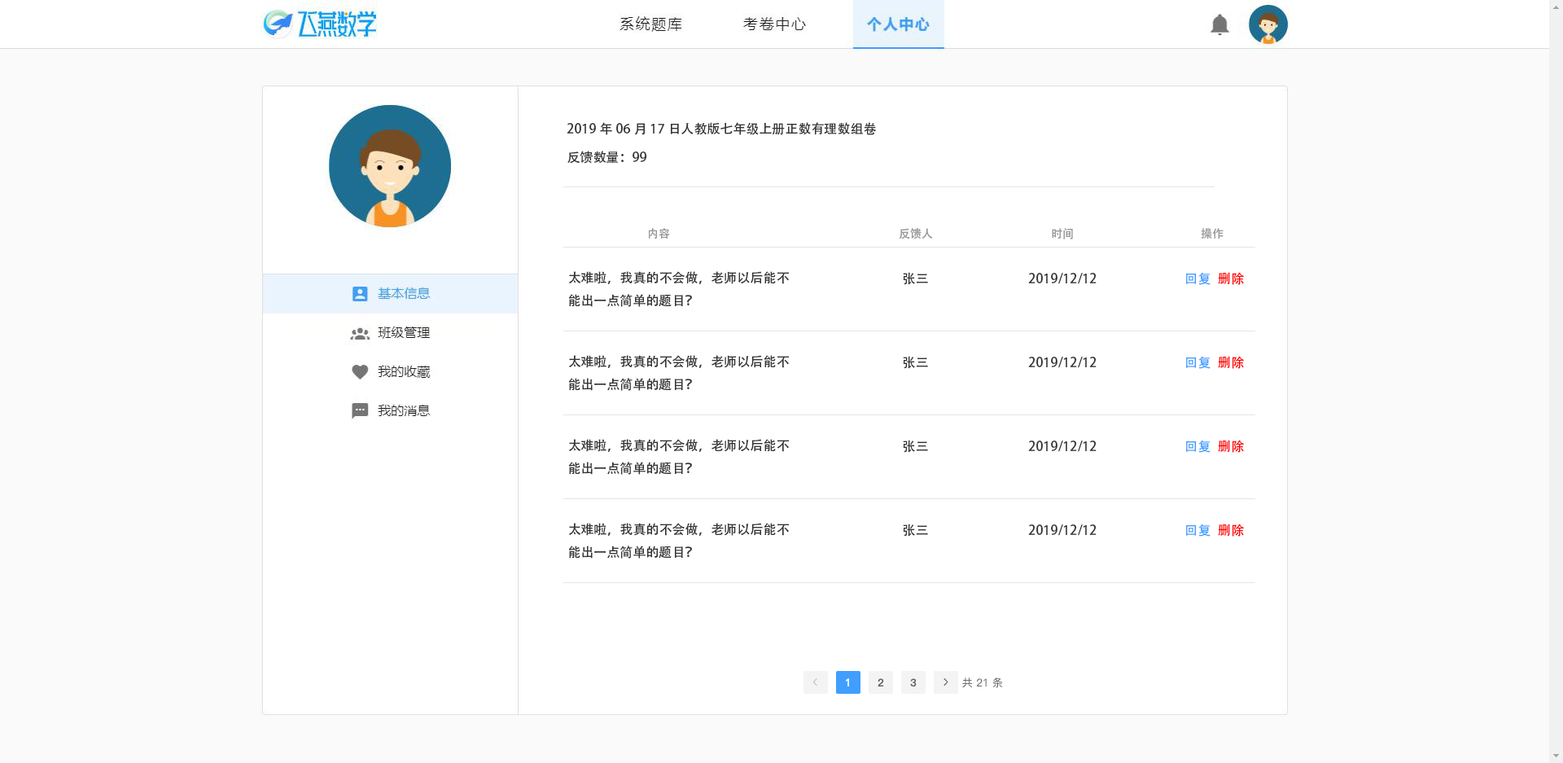
<style>
.page{position:relative;width:1563px;height:763px;background:#ffffff}
.page>*{position:absolute;margin:0}
.t1{font:13px "AdobeHeitiStd-Regular";color:#333333}
.t2{font:11.4px "AdobeHeitiStd-Regular";color:#999999}
.t3{font:13px "AdobeHeitiStd-Regular";color:#409eff}
.t4{font:13px "AdobeHeitiStd-Regular";color:#ff0100}
</style>
<div class="page">
<p class="t1" style="left:567px;top:122px;width:309px;height:13px">2019年06月17日人教版七年级上册正数有理数组卷</p>
<p class="t1" style="left:567px;top:151px;width:80px;height:13px">反馈数量：99</p>
<p class="t2" style="left:648px;top:228px;width:22px;height:11px">内容</p>
<p class="t2" style="left:899px;top:228px;width:34px;height:11px">反馈人</p>
<p class="t2" style="left:1052px;top:228px;width:21px;height:11px">时间</p>
<p class="t2" style="left:1201px;top:228px;width:23px;height:11px">操作</p>
<p class="t1" style="left:568px;top:271px;width:222px;height:36px">太难啦，我真的不会做，老师以后能不能出一点简单的题目？</p>
<p class="t1" style="left:903px;top:272px;width:25px;height:13px">张三</p>
<p class="t1" style="left:1028px;top:273px;width:69px;height:11px">2019/12/12</p>
<p class="t3" style="left:1186px;top:272px;width:25px;height:13px">回复</p>
<p class="t4" style="left:1218px;top:272px;width:27px;height:13px">删除</p>
<p class="t1" style="left:568px;top:355px;width:222px;height:36px">太难啦，我真的不会做，老师以后能不能出一点简单的题目？</p>
<p class="t1" style="left:903px;top:356px;width:25px;height:13px">张三</p>
<p class="t1" style="left:1028px;top:357px;width:69px;height:11px">2019/12/12</p>
<p class="t3" style="left:1186px;top:356px;width:25px;height:13px">回复</p>
<p class="t4" style="left:1218px;top:356px;width:27px;height:13px">删除</p>
<p class="t1" style="left:568px;top:439px;width:222px;height:36px">太难啦，我真的不会做，老师以后能不能出一点简单的题目？</p>
<p class="t1" style="left:903px;top:440px;width:25px;height:13px">张三</p>
<p class="t1" style="left:1028px;top:440px;width:69px;height:12px">2019/12/12</p>
<p class="t3" style="left:1186px;top:440px;width:25px;height:13px">回复</p>
<p class="t4" style="left:1218px;top:440px;width:27px;height:13px">删除</p>
<p class="t1" style="left:568px;top:523px;width:222px;height:35px">太难啦，我真的不会做，老师以后能不能出一点简单的题目？</p>
<p class="t1" style="left:903px;top:523px;width:25px;height:14px">张三</p>
<p class="t1" style="left:1028px;top:524px;width:69px;height:12px">2019/12/12</p>
<p class="t3" style="left:1186px;top:523px;width:25px;height:14px">回复</p>
<p class="t4" style="left:1218px;top:523px;width:27px;height:14px">删除</p>
</div>
